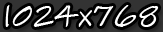
<style>
.page{position:relative;width:163px;height:32px;background:#000000}
.page>*{position:absolute;margin:0}
.t1{font:33.3px "SketchFlowPrint";color:#ffffff}
</style>
<div class="page">
<p class="t1" style="left:5px;top:5px;width:154px;height:22px">1024x768</p>
</div>
